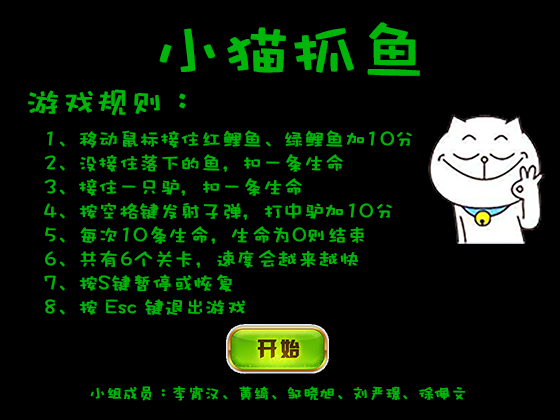
<style>
.page{position:relative;width:560px;height:420px;background:#000000}
.page>*{position:absolute;margin:0}
.t1{font:67.2px "DFWaWaSC-W5";color:#01b60a;font-weight:bold}
.t2{font:33.6px "DFWaWaSC-W5";color:#01b60a;font-weight:bold}
.t3{font:20px "DFWaWaSC-W5";color:#01b60a;font-weight:bold}
.t4{font:16px "DFWaWaSC-W5";color:#01b60a;font-weight:bold}
</style>
<div class="page">
<p class="t1" style="left:159px;top:22px;width:261px;height:54px">小猫抓鱼</p>
<p class="t2" style="left:28px;top:89px;width:158px;height:26px">游戏规则：</p>
<p class="t3" style="left:44px;top:130px;width:368px;height:185px">1、移动鼠标接住红鲤鱼、绿鲤鱼加10分<br>2、没接住落下的鱼，扣一条生命<br>3、接住一只驴，扣一条生命<br>4、按空格键发射子弹，打中驴加10分<br>5、每次10条生命，生命为0则结束<br>6、共有6个关卡，速度会越来越快<br>7、按S键暂停或恢复<br>8、按 Esc 键退出游戏</p>
<p class="t4" style="left:90px;top:386px;width:376px;height:15px">小组成员：李宵汉、黄绮、邹晓旭、刘严璟、徐佩文</p>
</div>
